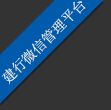
<style>
.page{position:relative;width:111px;height:110px;background:#333333}
.page>*{position:absolute;margin:0}
.t1{font:14px "SimSun";color:#f1f1f1}
</style>
<div class="page">
<p class="t1" style="left:1px;top:1px;width:85px;height:84px;rotate:-45deg">建行微信管理平台</p>
</div>
